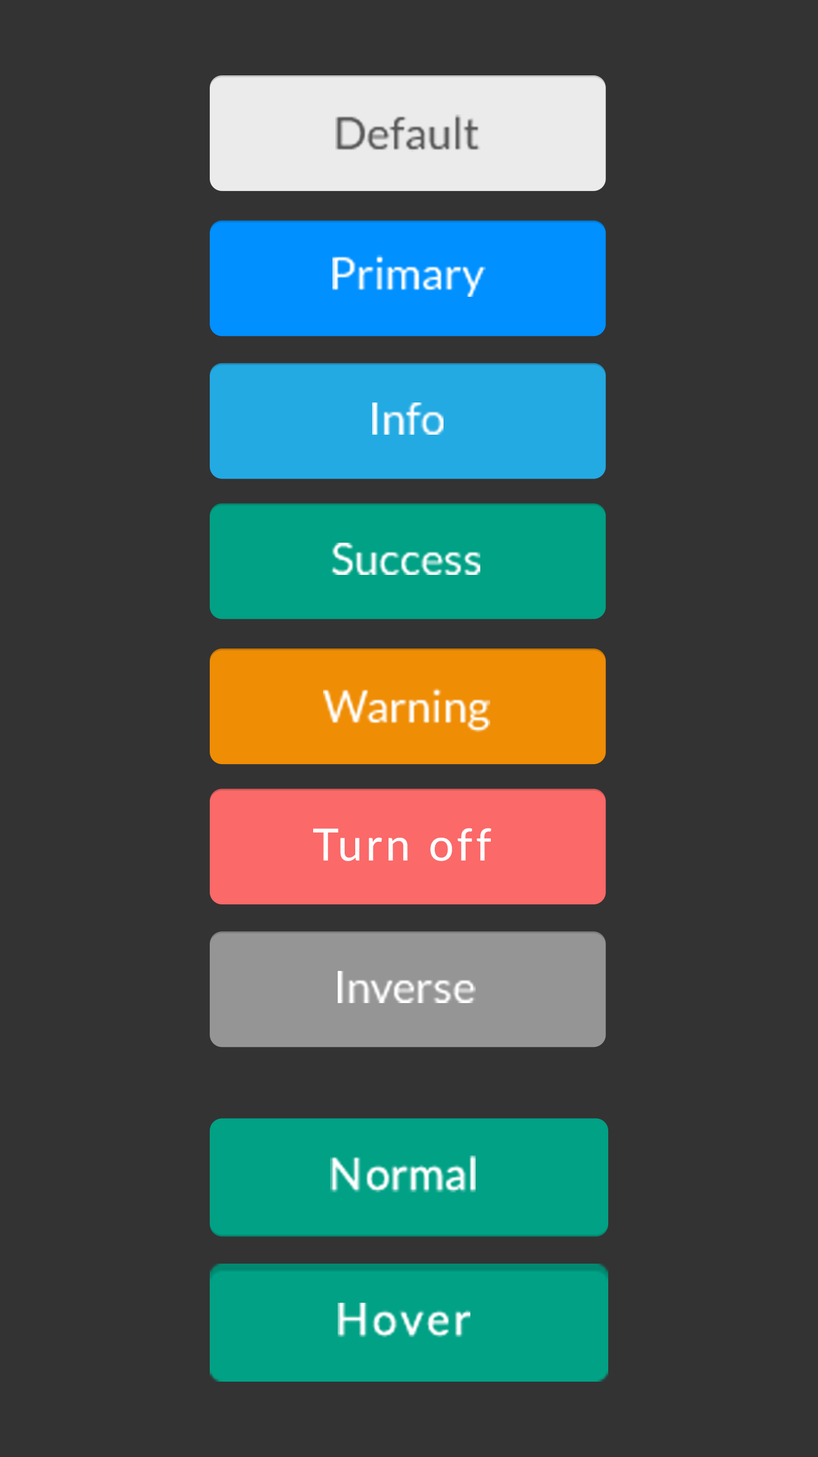
<style>
.page{position:relative;width:818px;height:1457px;background:#333333}
.page>*{position:absolute;margin:0}
.t1{font:44.3px "Lato-Regular";color:#595959}
.t2{font:44.3px "Lato-Regular";color:#ffffff}
.t3{font:44.3px "Lato-Regular";letter-spacing:0.08em;color:#ffffff}
</style>
<div class="page">
<p class="t1" style="left:335px;top:115px;width:145px;height:37px">Default</p>
<p class="t2" style="left:333px;top:255px;width:153px;height:42px">Primary</p>
<p class="t2" style="left:372px;top:403px;width:72px;height:32px">Info</p>
<p class="t2" style="left:330px;top:543px;width:150px;height:32px">Success</p>
<p class="t2" style="left:323px;top:688px;width:167px;height:44px">Warning</p>
<p class="t3" style="left:313px;top:828px;width:178px;height:33px">Turn off</p>
<p class="t2" style="left:338px;top:971px;width:138px;height:32px">Inverse</p>
<p class="t2" style="left:330px;top:1156px;width:146px;height:37px"><span class="t3">N</span>ormal</p>
<p class="t3" style="left:338px;top:1303px;width:132px;height:35px">Hover</p>
</div>
